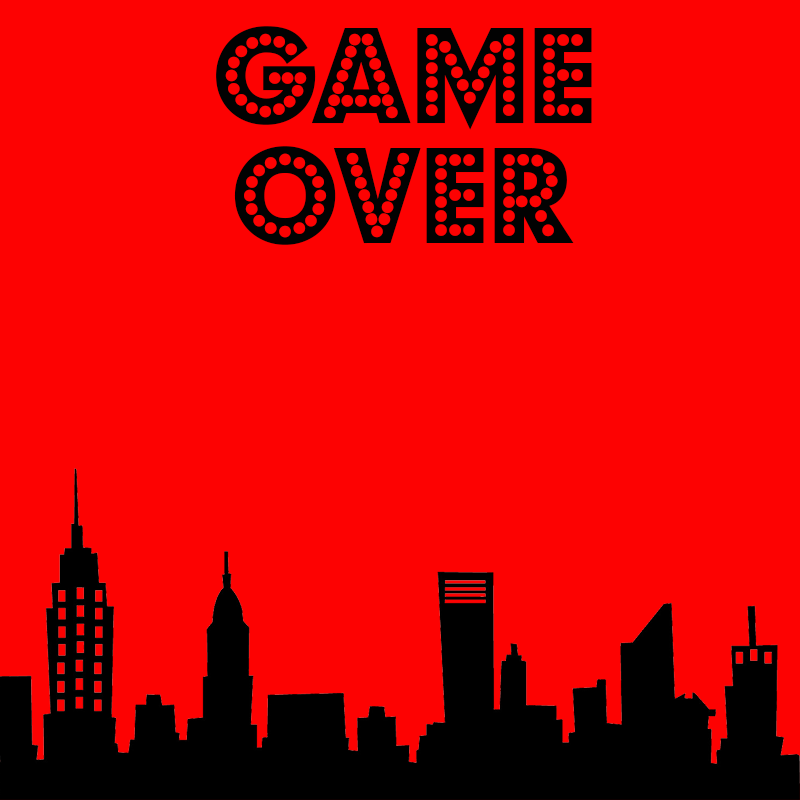
<style>
.page{position:relative;width:800px;height:800px;background:#fd0202}
.page>*{position:absolute;margin:0}
.t1{font:151.2px "BudmoJiggler-Regular";color:#020202}
</style>
<div class="page">
<p class="t1" style="left:216px;top:26px;width:376px;height:104px">Game</p>
<p class="t1" style="left:234px;top:146px;width:340px;height:99px">Over</p>
</div>
